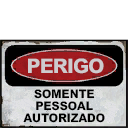
<style>
.page{position:relative;width:128px;height:128px;background:#ffffff}
.page>*{position:absolute;margin:0}
.t1{font:20px "MHeiPRC-Xbold";letter-spacing:-0.04em;color:#cecbce}
.t2{font:11.7px/12px "MHeiPRC-Xbold";color:#000000}
</style>
<div class="page">
<p class="t1" style="left:28px;top:58px;width:76px;height:16px">PERIGO</p>
<p class="t2" style="left:23px;top:89px;width:82px;height:34px;text-align:center">SOMENTE<br>PESSOAL<br>AUTORIZADO</p>
</div>
